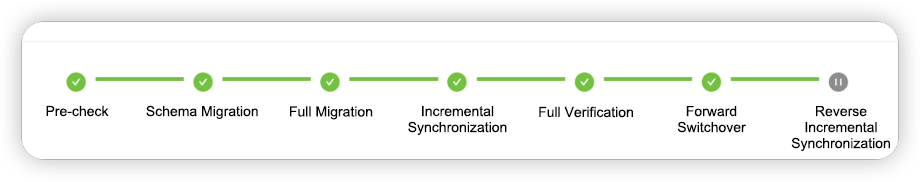
<style>
.page{position:relative;width:920px;height:182px;background:#ffffff}
.page>*{position:absolute;margin:0}
.t1{font:14px "ArialMT";color:#000000}
.t2{font:14px/16px "ArialMT";color:#000000}
</style>
<div class="page">
<p class="t1" style="left:46px;top:105px;width:63px;height:12px">Pre-check</p>
<p class="t1" style="left:146px;top:105px;width:112px;height:14px">Schema Migration</p>
<p class="t1" style="left:290px;top:106px;width:83px;height:14px">Full Migration</p>
<p class="t2" style="left:408px;top:106px;width:99px;height:29px;text-align:center">Incremental Synchronization</p>
<p class="t1" style="left:539px;top:106px;width:94px;height:12px">Full Verification</p>
<p class="t2" style="left:677px;top:106px;width:69px;height:27px;text-align:center">Forward Switchover</p>
<p class="t2" style="left:791px;top:106px;width:99px;height:45px;text-align:center">Reverse Incremental Synchronization</p>
</div>
